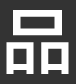
<style>
.page{position:relative;width:76px;height:84px;background:#333333}
.page>*{position:absolute;margin:0}
.t1{font:72px "FZLTZHK--GBK1-0";color:#ffffff}
</style>
<div class="page">
<p class="t1" style="left:6px;top:10px;width:63px;height:64px">品</p>
</div>
